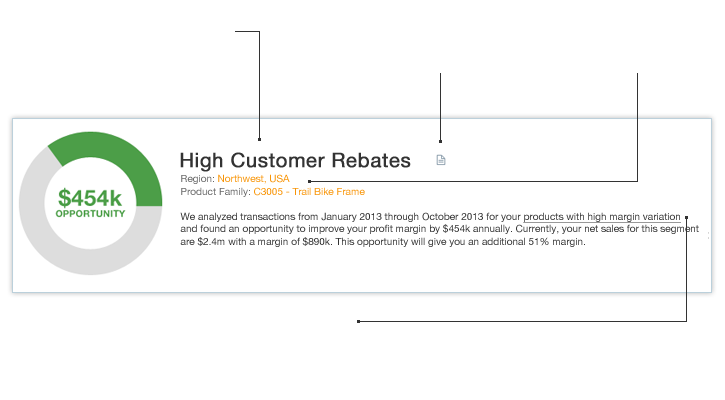
<style>
.page{position:relative;width:725px;height:400px;background:#ffffff}
.page>*{position:absolute;margin:0}
.t1{font:20px "HelveticaNeue";letter-spacing:0.015em;color:#333333;font-weight:bold}
.t2{font:10px/12.5px "HelveticaNeue";color:#333333}
.t3{font:10px/12.5px "HelveticaNeue";color:#666666}
.t4{font:10px/12.5px "HelveticaNeue";color:#f89406}
.t5{font:10px/12.5px "HelveticaNeue";color:#333333;text-decoration:underline}
</style>
<div class="page">
<p class="t1" style="left:180px;top:152px;width:231px;height:20px">High Customer Rebates</p>
<p class="t2" style="left:180px;top:174px;width:519px;height:73px"><span class="t3">Region: </span><span class="t4">Northwest, USA<br></span><span class="t3">Product Family: </span><span class="t4">C3005 - Trail Bike Frame<br><br></span>We analyzed transactions from January 2013 through October 2013 for your <span class="t5">products with high margin variation</span> <br>and found an opportunity to improve your profit margin by $454k annually. Currently, your net sales for this segment<br>are $2.4m with a margin of $890k. This opportunity will give you an additional 51% margin.</p>
</div>
